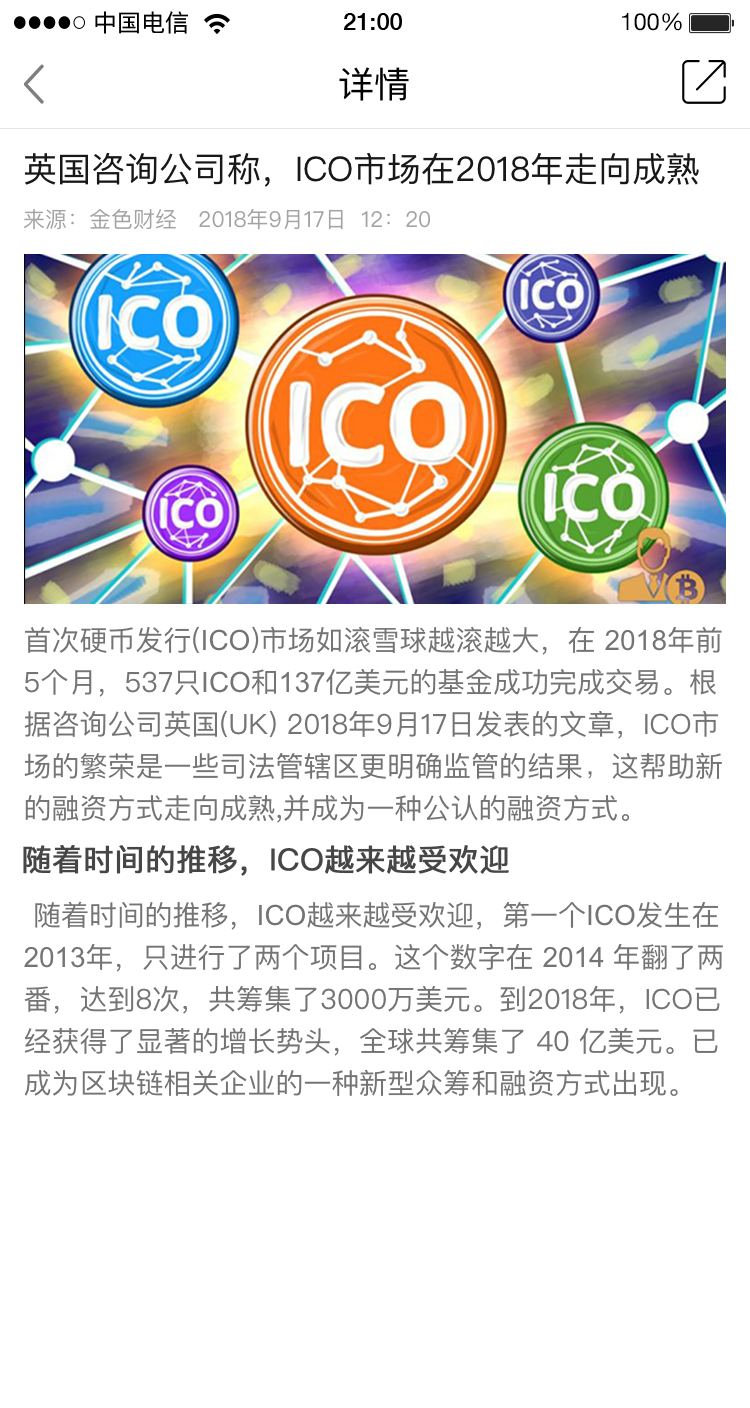
<style>
.page{position:relative;width:750px;height:1408px;background:#ffffff}
.page>*{position:absolute;margin:0}
.t1{font:23.8px "PingFangHK-Regular";letter-spacing:-0.001em;color:#000000}
.t2{font:23.8px "HelveticaNeue-Medium";color:#000000}
.t3{font:23.8px "HelveticaNeue";color:#000000}
.t4{font:36px "PingFangHK-Regular";letter-spacing:-0.001em;color:#000000}
.t5{font:34px "PingFangSC-Regular";letter-spacing:-0.001em;color:#181818}
.t6{font:22px "PingFangSC-Regular";letter-spacing:-0.001em;color:#a3a3a3}
.t7{font:28px/42px "PingFangSC-Regular";letter-spacing:-0.001em;color:#747474}
.t8{font:28px/42px "ArialMT";letter-spacing:-0.001em;color:#747474}
.t9{font:28px/42px "STHeitiSC-Light";letter-spacing:-0.001em;color:#747474}
.t10{font:30px "PingFangSC-Regular";letter-spacing:-0.001em;color:#464646;font-weight:bold}
</style>
<div class="page">
<p class="t1" style="left:95px;top:11px;width:93px;height:23px">中国电信</p>
<p class="t2" style="left:343px;top:13px;width:59px;height:17px">21:00</p>
<p class="t3" style="left:622px;top:12px;width:60px;height:19px">100%</p>
<p class="t4" style="left:339px;top:67px;width:70px;height:34px">详情</p>
<p class="t5" style="left:24px;top:152px;width:675px;height:35px">英国咨询公司称，ICO市场在2018年走向成熟</p>
<p class="t6" style="left:24px;top:209px;width:152px;height:21px">来源：金色财经</p>
<p class="t6" style="left:199px;top:208px;width:232px;height:22px">2018年9月17日  12：20</p>
<p class="t7" style="left:24px;top:626px;width:698px;height:197px">首次硬币发行(<span class="t8">ICO</span>)市场如滚雪球越滚越大，在 <span class="t8">2018</span>年前5个月，537只<span class="t8">ICO</span>和<span class="t8">137</span>亿美元的基金成功完成交易。根据咨询公司英国(UK) 2018年9月17日发表的文章，ICO市场的繁荣是一些司法管辖区更明确监管的结果<span class="t9">，</span>这帮助新的融资方式走向成熟,并成为一种公认的融资方式。</p>
<p class="t10" style="left:23px;top:845px;width:486px;height:31px">随着时间的推移，ICO越来越受欢迎</p>
<p class="t7" style="left:24px;top:901px;width:699px;height:195px">随着时间的推移，<span class="t8">ICO</span>越来越受欢迎，第一个<span class="t8">ICO</span>发生在  <span class="t8">2013</span>年，只进行了两个项目。这个数字在 <span class="t8">2014 </span>年翻了两番，达到8次，共筹集了3000万美元。到2018年，ICO已经获得了显著的增长势头，全球共筹集了 40 亿美元。已成为区块链相关企业的一种新型众筹和融资方式出现。</p>
</div>
